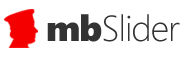
<style>
.page{position:relative;width:188px;height:59px;background:#ffffff}
.page>*{position:absolute;margin:0}
.t1{font:36px "SegoeUI-Light";letter-spacing:-0.025em;color:#333333}
.t2{font:36px "SegoeUIBlack";letter-spacing:-0.025em;color:#333333}
</style>
<div class="page">
<p class="t1" style="left:47px;top:14px;width:133px;height:28px"><span class="t2">mb</span>Slider</p>
</div>
